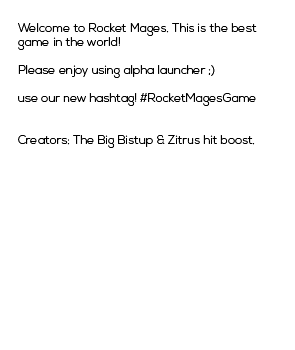
<style>
.page{position:relative;width:295px;height:350px;background:#ffffff}
.page>*{position:absolute;margin:0}
.t1{font:12px/14px "NexaLight";color:#000000}
</style>
<div class="page">
<p class="t1" style="left:18px;top:23px;width:239px;height:125px">Welcome to Rocket Mages. This is the best<br>game in the world! <br><br>Please enjoy using alpha launcher ;)<br><br>use our new hashtag! #RocketMagesGame<br><br><br>Creators: The Big Bistup &amp; Zitrus hit boost.</p>
</div>
